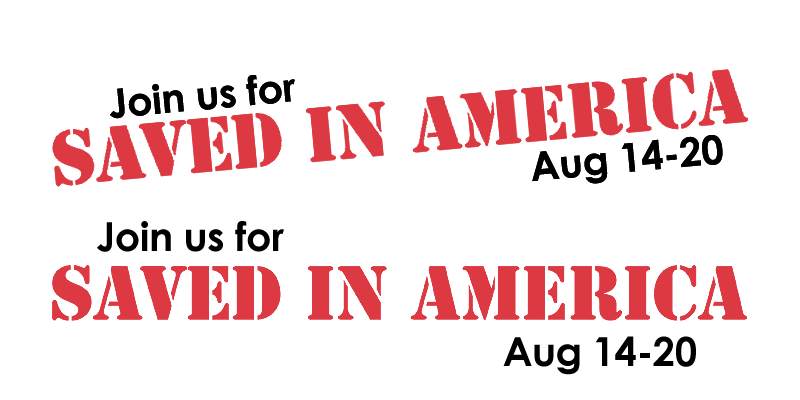
<style>
.page{position:relative;width:800px;height:400px;background:#ffffff}
.page>*{position:absolute;margin:0}
.t1{font:40px "CenturyGothic-Bold";letter-spacing:-0.01em;color:#000000}
</style>
<div class="page">
<p class="t1" style="left:110px;top:75px;width:185px;height:44px;rotate:-5deg">Join us for</p>
<p class="t1" style="left:532px;top:135px;width:191px;height:49px;rotate:-5deg">Aug 14-20</p>
<p class="t1" style="left:97px;top:221px;width:187px;height:31px">Join us for</p>
<p class="t1" style="left:503px;top:336px;width:193px;height:39px">Aug 14-20</p>
</div>
